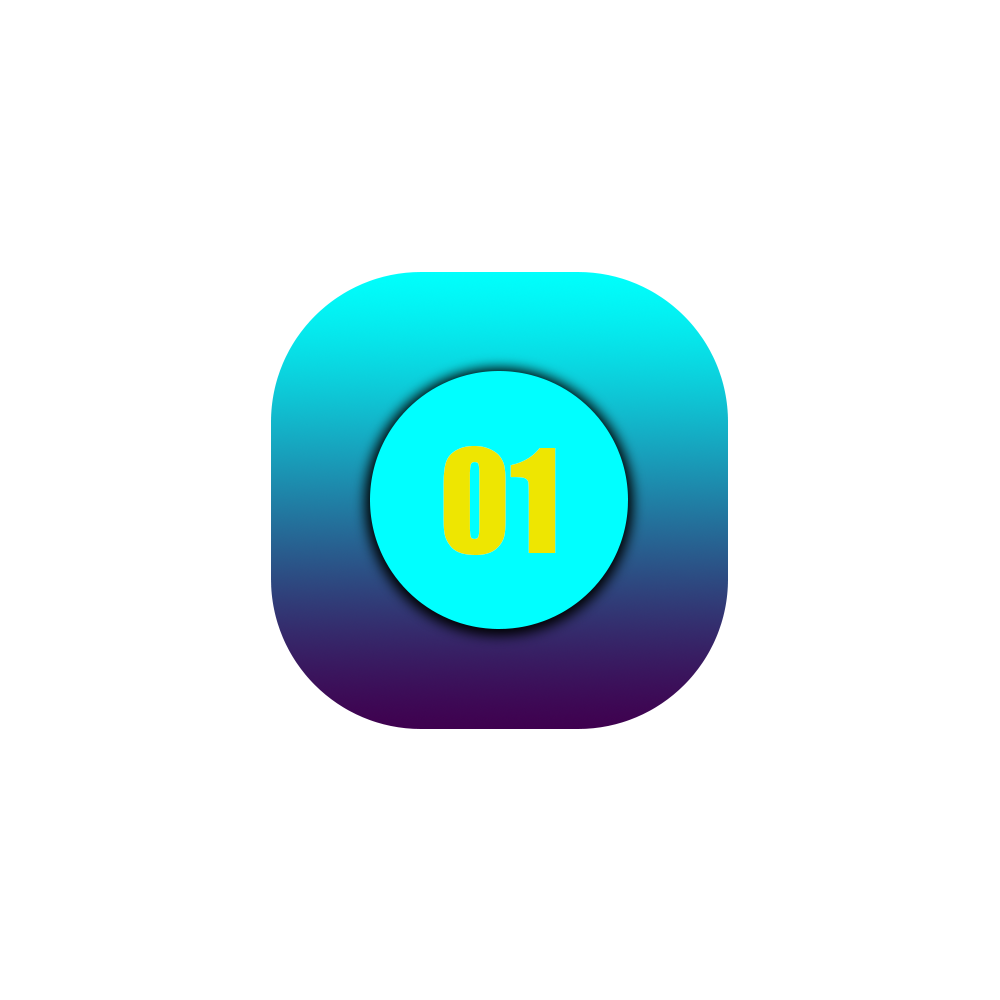
<style>
.page{position:relative;width:1000px;height:1000px;background:#ffffff}
.page>*{position:absolute;margin:0}
.t1{font:133.3px "Impact";color:#eee601}
</style>
<div class="page">
<p class="t1" style="left:443px;top:446px;width:113px;height:109px">01</p>
</div>
